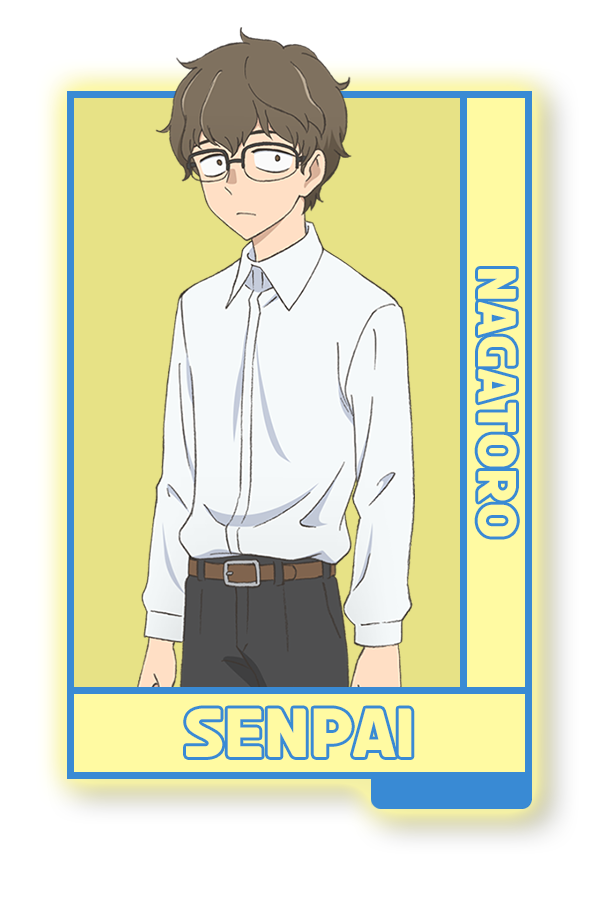
<style>
.page{position:relative;width:600px;height:900px;background:#ffffff}
.page>*{position:absolute;margin:0}
.t1{font:48.8px "aAppleTea";color:#fffaa2}
.t2{font:62.6px "aAppleTea";color:#fffaa2}
</style>
<div class="page">
<p class="t1" style="left:477px;top:269px;width:40px;height:268px;rotate:90deg">NAGATORO</p>
<p class="t2" style="left:186px;top:708px;width:226px;height:49px">SENPAI</p>
</div>
